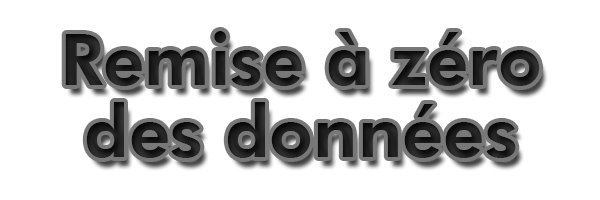
<style>
.page{position:relative;width:600px;height:200px;background:#ffffff}
.page>*{position:absolute;margin:0}
.t1{font:72px/36px "FuturaBT-Heavy";color:#1d1d1d}
</style>
<div class="page">
<p class="t1" style="left:65px;top:31px;width:475px;height:127px;text-align:center">Remise à zéro<br><br>des données</p>
</div>
